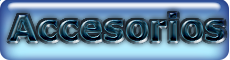
<style>
.page{position:relative;width:230px;height:60px}
.page>*{position:absolute;margin:0}
.t1{font:36px "Verdana-Bold"}
</style>
<div class="page">
<p class="t1" style="left:9px;top:13px;width:216px;height:28px">Accesorios</p>
</div>
